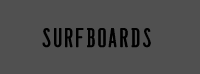
<style>
.page{position:relative;width:200px;height:74px;background:#505050}
.page>*{position:absolute;margin:0}
.t1{font:24.2px "DealerplateCalifornia-Regular";letter-spacing:0.1em;color:#000000;font-weight:bold;scale:0.91 1}
</style>
<div class="page">
<p class="t1" style="left:42px;top:28px;width:109px;height:20px">surfboards</p>
</div>
